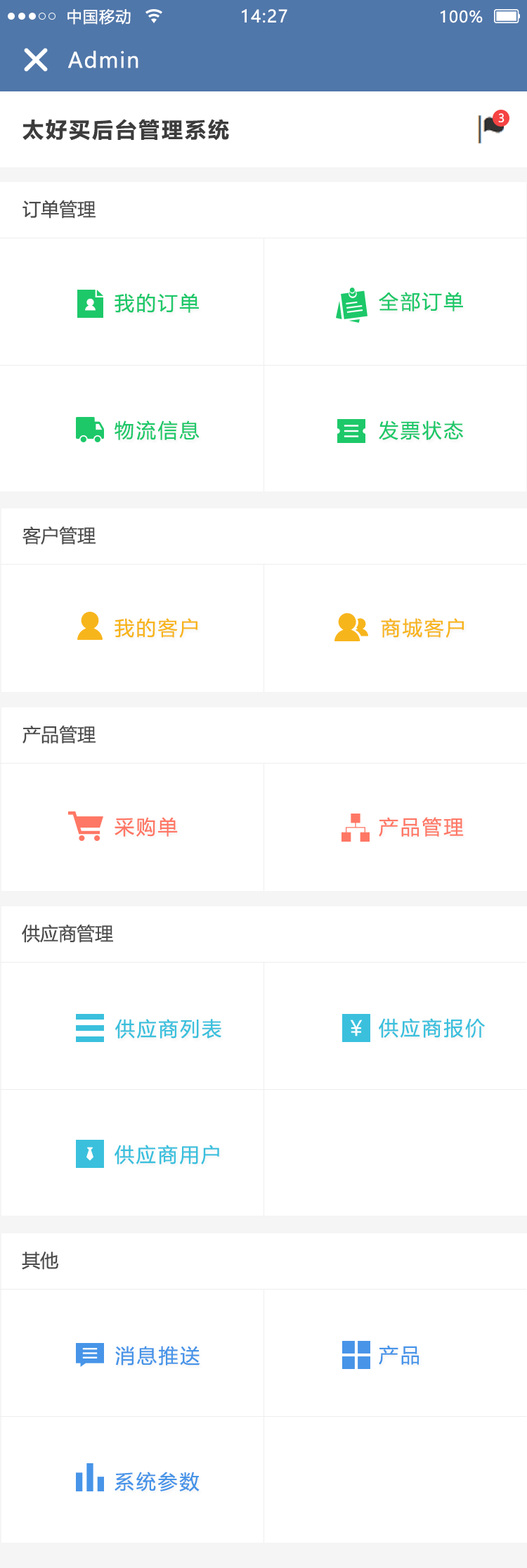
<style>
.page{position:relative;width:527px;height:1568px;background:#ffffff}
.page>*{position:absolute;margin:0}
.t1{font:15.5px "MicrosoftYaHei";letter-spacing:0.06em;color:#ffffff}
.t2{font:16.9px "MicrosoftYaHei";letter-spacing:0.06em;color:#ffffff}
.t3{font:21px "MicrosoftYaHei";letter-spacing:0.06em;color:#ffffff}
.t4{font:11.3px "MicrosoftYaHeiUI";color:#ffffff}
.t5{font:21.1px "MicrosoftYaHeiUI-Bold";letter-spacing:0.1em;color:#3c3c3c}
.t6{font:18.3px "MicrosoftYaHeiUI";color:#4c4c4c}
.t7{font:19.7px "MicrosoftYaHeiUI";letter-spacing:0.1em;color:#1dc869}
.t8{font:19.7px "MicrosoftYaHeiUI";letter-spacing:0.1em;color:#f7b51c}
.t9{font:19.7px "MicrosoftYaHeiUI";letter-spacing:0.1em;color:#ff7765}
.t10{font:19.7px "MicrosoftYaHeiUI";letter-spacing:0.1em;color:#ff7866}
.t11{font:19.7px "MicrosoftYaHeiUI";letter-spacing:0.1em;color:#3ac0dd}
.t12{font:19.7px "MicrosoftYaHeiUI";letter-spacing:0.1em;color:#4794e8}
</style>
<div class="page">
<p class="t1" style="left:68px;top:8px;width:63px;height:17px">中国移动</p>
<p class="t2" style="left:242px;top:9px;width:46px;height:14px">14:27</p>
<p class="t1" style="left:441px;top:10px;width:42px;height:13px">100%</p>
<p class="t3" style="left:68px;top:51px;width:71px;height:17px">Admin</p>
<p class="t4" style="left:499px;top:113px;width:6px;height:9px">3</p>
<p class="t5" style="left:23px;top:119px;width:206px;height:22px">太好买后台管理系统</p>
<p class="t6" style="left:23px;top:200px;width:73px;height:19px">订单管理</p>
<p class="t7" style="left:115px;top:293px;width:84px;height:20px">我的订单</p>
<p class="t7" style="left:379px;top:292px;width:84px;height:19px">全部订单</p>
<p class="t7" style="left:115px;top:420px;width:85px;height:20px">物流信息</p>
<p class="t7" style="left:379px;top:420px;width:85px;height:20px">发票状态</p>
<p class="t6" style="left:23px;top:526px;width:73px;height:19px">客户管理</p>
<p class="t8" style="left:115px;top:618px;width:83px;height:20px">我的客户</p>
<p class="t8" style="left:381px;top:618px;width:83px;height:20px">商城客户</p>
<p class="t6" style="left:23px;top:725px;width:73px;height:19px">产品管理</p>
<p class="t9" style="left:115px;top:817px;width:63px;height:20px">采购单</p>
<p class="t10" style="left:379px;top:817px;width:85px;height:20px">产品管理</p>
<p class="t6" style="left:22px;top:924px;width:91px;height:19px">供应商管理</p>
<p class="t11" style="left:115px;top:1019px;width:106px;height:20px">供应商列表</p>
<p class="t11" style="left:379px;top:1018px;width:106px;height:20px">供应商报价</p>
<p class="t11" style="left:115px;top:1145px;width:104px;height:19px">供应商用户</p>
<p class="t6" style="left:22px;top:1252px;width:36px;height:18px">其他</p>
<p class="t12" style="left:115px;top:1346px;width:85px;height:19px">消息推送</p>
<p class="t12" style="left:379px;top:1345px;width:40px;height:20px">产品</p>
<p class="t12" style="left:115px;top:1472px;width:85px;height:19px">系统参数</p>
</div>
